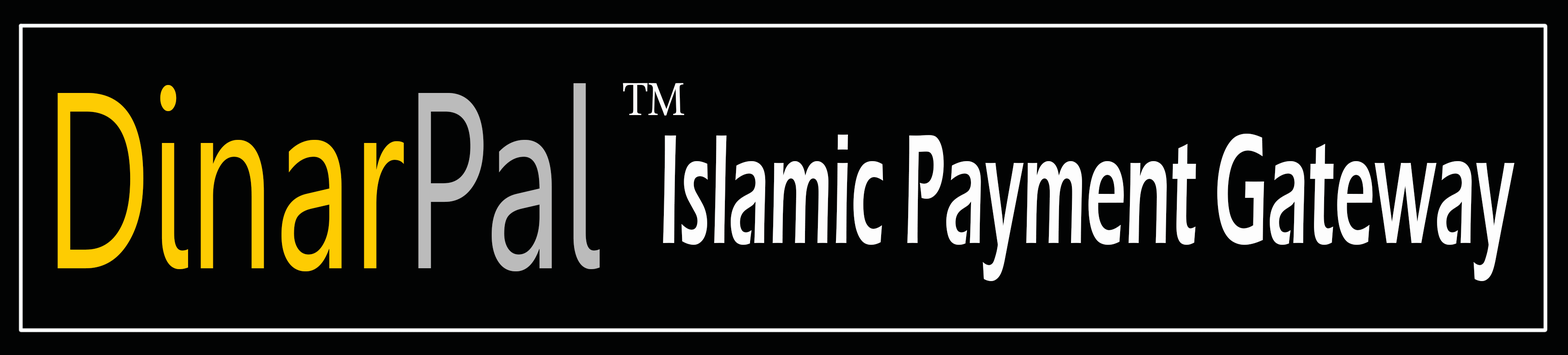
<style>
.page{position:relative;width:1568px;height:355px;background:#020303}
.page>*{position:absolute;margin:0}
.t1{font:249.9px "Gisha";color:#fecc02;scale:0.61 1}
.t2{font:249.9px "Gisha";color:#bbbbbb;scale:0.61 1}
.t3{font:68.1px "MicrosoftUighur";color:#fdfdfd;scale:0.87 1}
.t4{font:160.9px "ErasITC-Demi";color:#fdfdfd;scale:0.44 1}
</style>
<div class="page">
<p class="t1" style="left:58px;top:83px;width:542px;height:188px">Dinar<span class="t2">Pal</span></p>
<p class="t3" style="left:623px;top:83px;width:61px;height:33px">TM</p>
<p class="t4" style="left:663px;top:134px;width:851px;height:147px">Islamic Payment Gateway</p>
</div>
